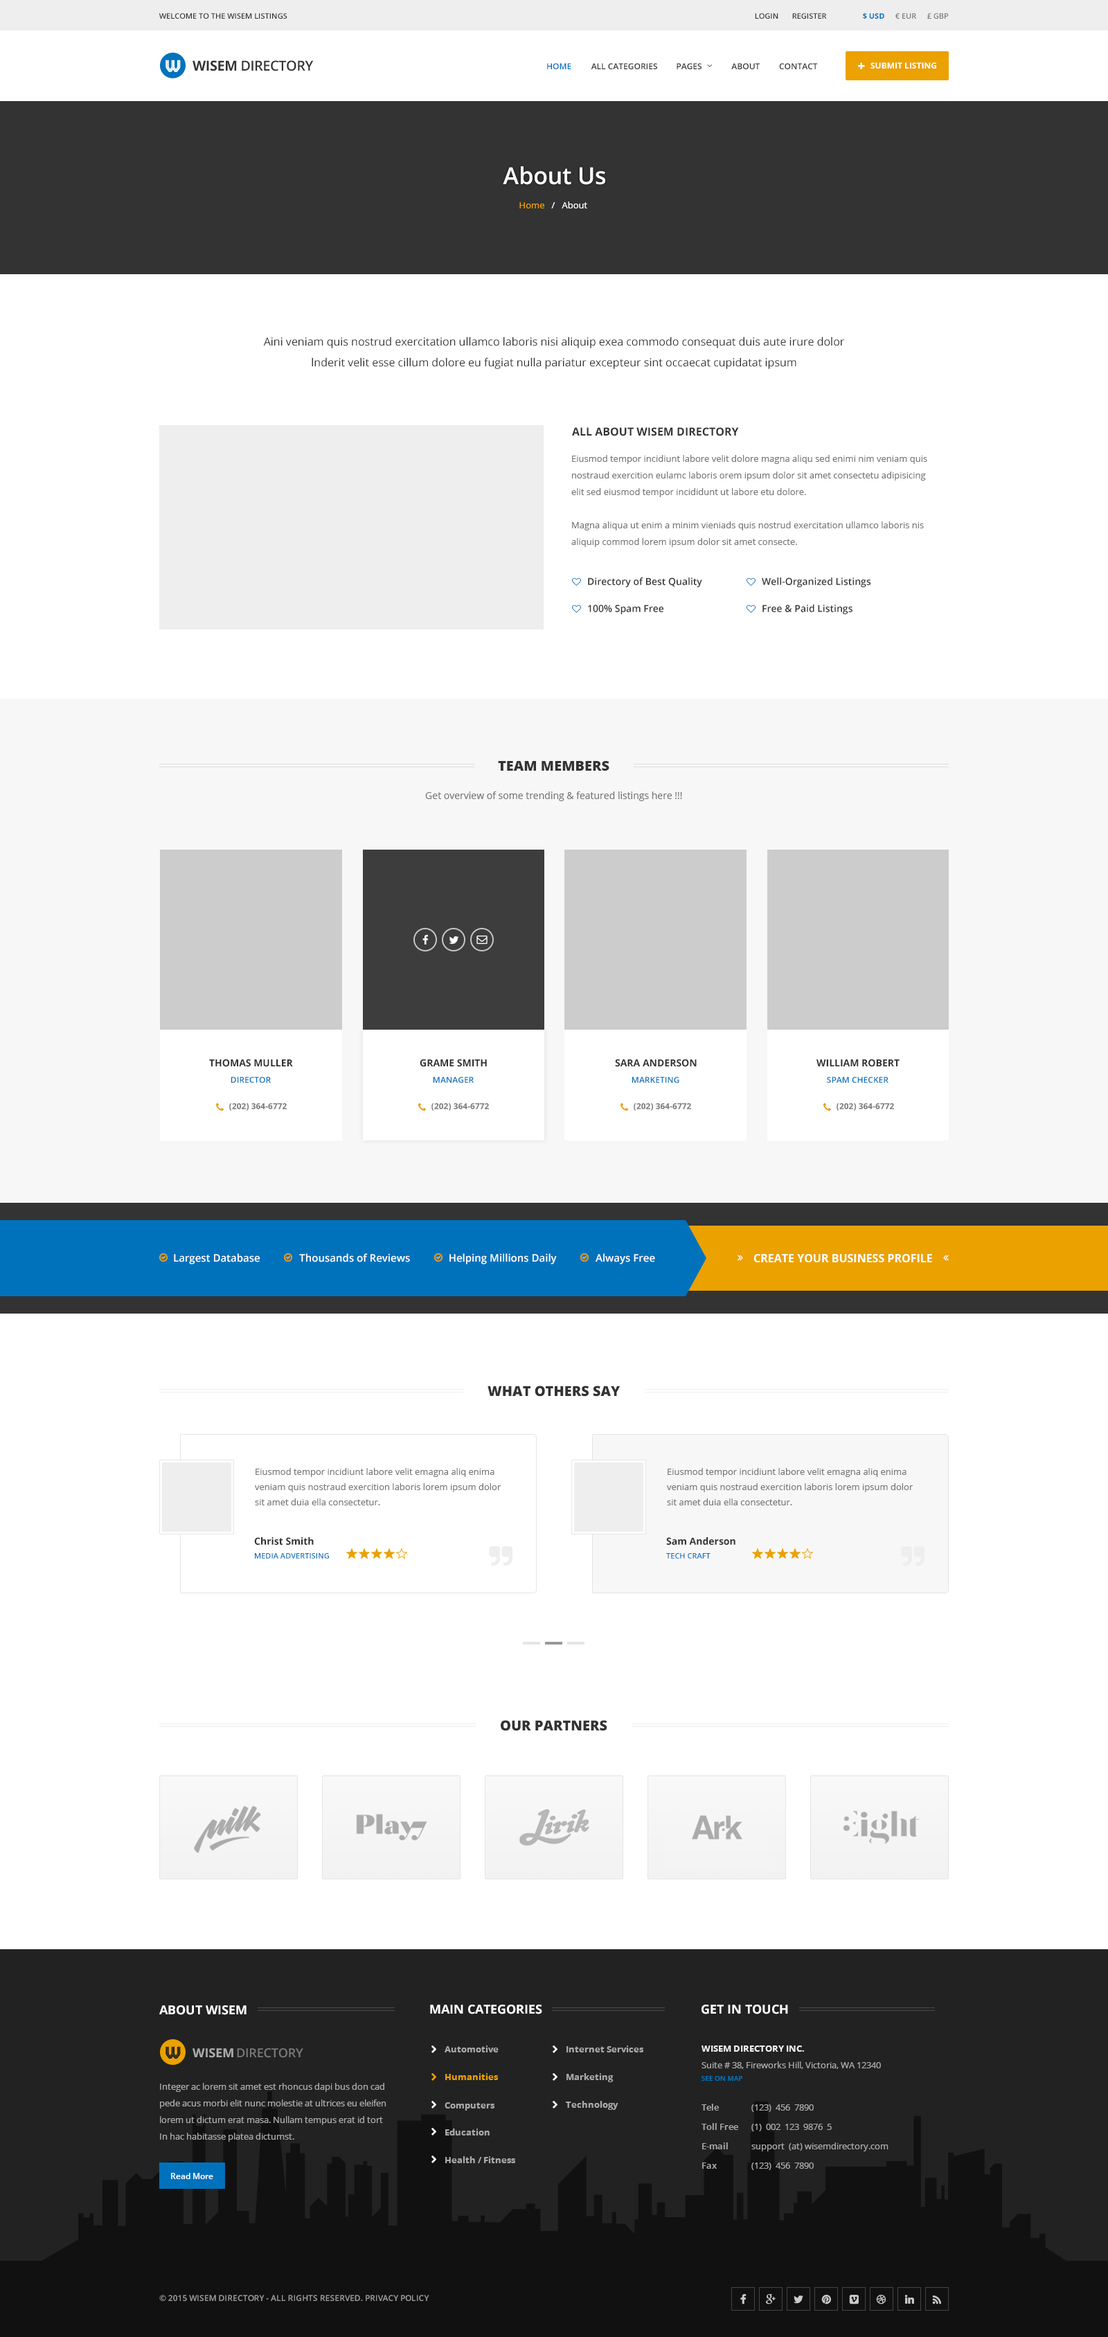
<style>
.page{position:relative;width:1108px;height:2337px;background:#ffffff}
.page>*{position:absolute;margin:0}
.t1{font:7.6px "OpenSans-Semibold";color:#333333;text-transform:uppercase}
.t2{font:7.6px "OpenSans-Bold";color:#0072bc;text-transform:uppercase}
.t3{font:7.6px "OpenSans-Semibold";color:#777777;text-transform:uppercase}
.t4{font:13.8px "OpenSans-Semibold";letter-spacing:-0.025em;color:#333333;text-transform:uppercase}
.t5{font:13.8px "OpenSans-Bold";letter-spacing:-0.025em;color:#333333;text-transform:uppercase}
.t6{font:8.3px "OpenSans-Semibold";color:#0072bc;text-transform:uppercase}
.t7{font:8.3px "OpenSans-Semibold";color:#333333;text-transform:uppercase}
.t8{font:8.3px "OpenSans-Bold";color:#ffffff;text-transform:uppercase}
.t9{font:23.5px "OpenSans-Semibold";color:#ffffff}
.t10{font:9px "OpenSans";color:#ffffff}
.t11{font:9px "OpenSans";color:#eba100}
.t12{font:11.1px/20.8px "OpenSans";color:#333333}
.t13{font:11.1px "OpenSans-Bold";color:#333333;text-transform:uppercase}
.t14{font:9px/16.6px "OpenSans";color:#777777}
.t15{font:9.7px "OpenSans-Semibold";color:#333333}
.t16{font:13.8px "OpenSans-Extrabold";color:#333333;text-transform:uppercase}
.t17{font:9.7px "OpenSans";color:#777777}
.t18{font:9.7px "OpenSans-Bold";color:#333333;text-transform:uppercase}
.t19{font:8.3px "OpenSans-Bold";color:#777777}
.t20{font:10.4px "OpenSans-Semibold";color:#ffffff}
.t21{font:11.1px "OpenSans-Bold";color:#ffffff;text-transform:uppercase}
.t22{font:9px/15.2px "OpenSans";color:#777777}
.t23{font:9.7px "OpenSans-Bold";color:#333333}
.t24{font:7.6px "OpenSans-Semibold";color:#0072bc;text-transform:uppercase}
.t25{font:12.5px "OpenSans-Bold";color:#ffffff;text-transform:uppercase}
.t26{font:12.5px "OpenSans-Bold";color:#ffffff}
.t27{font:9px "OpenSans-Bold";color:#aaaaaa}
.t28{font:9px/16.6px "OpenSans";color:#aaaaaa}
.t29{font:9px/16.6px "OpenSans-Bold";color:#eeeeee}
.t30{font:12.5px "OpenSans-Bold";color:#aaaaaa;text-transform:uppercase}
.t31{font:12.5px "OpenSans-Semibold";letter-spacing:-0.01em;color:#777777;text-transform:uppercase}
.t32{font:9px "OpenSans-Bold";color:#eba100}
.t33{font:6.9px "OpenSans-Semibold";color:#0072bc;text-transform:uppercase}
.t34{font:9px/19.4px "OpenSans-Semibold";color:#aaaaaa}
.t35{font:9px/19.4px "OpenSans";color:#aaaaaa}
.t36{font:8.3px "OpenSans-Semibold";color:#ffffff}
.t37{font:8.3px "OpenSans-Semibold";letter-spacing:-0.01em;color:#999999;text-transform:uppercase}
</style>
<div class="page">
<p class="t1" style="left:159px;top:13px;width:128px;height:6px">Welcome to the Wisem listings</p>
<p class="t1" style="left:755px;top:13px;width:23px;height:6px">LOGIN</p>
<p class="t1" style="left:792px;top:13px;width:35px;height:6px">register</p>
<p class="t2" style="left:863px;top:12px;width:21px;height:7px">$ USD</p>
<p class="t3" style="left:895px;top:13px;width:21px;height:6px">€ EUR</p>
<p class="t3" style="left:927px;top:13px;width:21px;height:6px">£ GBP</p>
<p class="t4" style="left:192px;top:60px;width:122px;height:11px"><span class="t5">wisem</span> directory</p>
<p class="t6" style="left:547px;top:63px;width:24px;height:6px">HOME</p>
<p class="t7" style="left:591px;top:63px;width:66px;height:6px">All categories</p>
<p class="t7" style="left:676px;top:63px;width:25px;height:6px">Pages</p>
<p class="t7" style="left:731px;top:63px;width:28px;height:6px">About</p>
<p class="t7" style="left:779px;top:63px;width:39px;height:6px">Contact</p>
<p class="t8" style="left:870px;top:62px;width:66px;height:7px">Submit Listing</p>
<p class="t9" style="left:503px;top:166px;width:102px;height:19px">About Us</p>
<p class="t10" style="left:519px;top:201px;width:68px;height:7px"><span class="t11">Home</span>   /   About</p>
<p class="t12" style="left:263px;top:336px;width:581px;height:33px;text-align:center">Aini veniam quis nostrud exercitation ullamco laboris nisi aliquip exea commodo consequat duis aute irure dolor<br>lnderit velit esse cillum dolore eu fugiat nulla pariatur excepteur sint occaecat cupidatat ipsum</p>
<p class="t13" style="left:572px;top:427px;width:167px;height:9px">ALL ABOUT wisem directory</p>
<p class="t14" style="left:571px;top:455px;width:356px;height:92px">Eiusmod tempor incidiunt labore velit dolore magna aliqu sed enimi nim veniam quis<br>nostraud exercition eulamc laboris orem ipsum dolor sit amet consectetu adipisicing<br>elit sed eiusmod tempor incididunt ut labore etu dolore.<br><br>Magna aliqua ut enim a minim vieniads quis nostrud exercitation ullamco laboris nis<br>aliquip commod lorem ipsum dolor sit amet consecte.</p>
<p class="t15" style="left:588px;top:577px;width:114px;height:10px">Directory of Best Quality</p>
<p class="t15" style="left:762px;top:577px;width:109px;height:10px">Well-Organized Listings</p>
<p class="t15" style="left:588px;top:604px;width:75px;height:10px">100% Spam Free</p>
<p class="t15" style="left:762px;top:604px;width:90px;height:10px">Free &amp; Paid Listings</p>
<p class="t16" style="left:498px;top:761px;width:111px;height:10px">team members</p>
<p class="t17" style="left:425px;top:791px;width:257px;height:10px">Get overview of some trending &amp; featured listings here !!!</p>
<p class="t18" style="left:209px;top:1059px;width:84px;height:8px">Thomas muller</p>
<p class="t18" style="left:420px;top:1059px;width:67px;height:8px">Grame smith</p>
<p class="t18" style="left:615px;top:1059px;width:81px;height:8px">sara anderson</p>
<p class="t18" style="left:816px;top:1059px;width:83px;height:8px">william robert</p>
<p class="t6" style="left:231px;top:1077px;width:40px;height:6px">Director</p>
<p class="t6" style="left:433px;top:1077px;width:41px;height:6px">Manager</p>
<p class="t6" style="left:631px;top:1077px;width:48px;height:6px">Marketing</p>
<p class="t6" style="left:827px;top:1077px;width:61px;height:6px">spam checker</p>
<p class="t19" style="left:229px;top:1103px;width:58px;height:7px">(202) 364-6772</p>
<p class="t19" style="left:431px;top:1103px;width:58px;height:7px">(202) 364-6772</p>
<p class="t19" style="left:633px;top:1103px;width:58px;height:7px">(202) 364-6772</p>
<p class="t19" style="left:836px;top:1103px;width:58px;height:7px">(202) 364-6772</p>
<p class="t20" style="left:174px;top:1253px;width:86px;height:11px">Largest Database</p>
<p class="t20" style="left:299px;top:1253px;width:111px;height:9px">Thousands of Reviews</p>
<p class="t20" style="left:449px;top:1253px;width:108px;height:11px">Helping Millions Daily</p>
<p class="t20" style="left:595px;top:1253px;width:60px;height:11px">Always Free</p>
<p class="t21" style="left:754px;top:1254px;width:178px;height:8px">create your business profile</p>
<p class="t16" style="left:487px;top:1385px;width:133px;height:11px">What others say</p>
<p class="t22" style="left:255px;top:1468px;width:246px;height:37px">Eiusmod tempor incidiunt labore velit emagna aliq enima<br>veniam quis nostraud exercition laboris lorem ipsum dolor<br>sit amet duia ella consectetur.</p>
<p class="t22" style="left:667px;top:1468px;width:246px;height:37px">Eiusmod tempor incidiunt labore velit emagna aliq enima<br>veniam quis nostraud exercition laboris lorem ipsum dolor<br>sit amet duia ella consectetur.</p>
<p class="t23" style="left:254px;top:1537px;width:60px;height:8px">Christ Smith</p>
<p class="t23" style="left:666px;top:1537px;width:69px;height:8px">Sam Anderson</p>
<p class="t24" style="left:255px;top:1553px;width:74px;height:5px">Media Advertising</p>
<p class="t24" style="left:666px;top:1553px;width:44px;height:5px">tech craft</p>
<p class="t16" style="left:501px;top:1720px;width:106px;height:11px">our partners</p>
<p class="t25" style="left:159px;top:2005px;width:87px;height:10px">About wisem</p>
<p class="t25" style="left:430px;top:2004px;width:112px;height:10px">main categories</p>
<p class="t26" style="left:701px;top:2004px;width:87px;height:10px">GET IN TOUCH</p>
<p class="t27" style="left:444px;top:2045px;width:54px;height:7px">Automotive</p>
<p class="t27" style="left:566px;top:2045px;width:78px;height:7px">Internet Services</p>
<p class="t28" style="left:701px;top:2045px;width:180px;height:24px"><span class="t29">WISEM DIRECTORY INC.<br></span>Suite # 38, Fireworks Hill, Victoria, WA 12340</p>
<p class="t30" style="left:192px;top:2048px;width:41px;height:10px">wisem</p>
<p class="t31" style="left:237px;top:2048px;width:66px;height:10px">directory</p>
<p class="t32" style="left:445px;top:2073px;width:53px;height:7px">Humanities</p>
<p class="t27" style="left:566px;top:2073px;width:47px;height:9px">Marketing</p>
<p class="t33" style="left:701px;top:2076px;width:41px;height:4px">see on map</p>
<p class="t28" style="left:160px;top:2082px;width:226px;height:59px">Integer ac lorem sit amet est rhoncus dapi bus don cad<br>pede acus morbi elit nunc molestie at ultrices eu eleifen<br>lorem ut dictum erat masa. Nullam tempus erat id tort<br>In hac habitasse platea dictumst.</p>
<p class="t27" style="left:444px;top:2102px;width:51px;height:8px">Computers</p>
<p class="t27" style="left:566px;top:2100px;width:52px;height:9px">Technology</p>
<p class="t34" style="left:701px;top:2103px;width:37px;height:65px">Tele<br>Toll Free<br>E-mail<br>Fax</p>
<p class="t35" style="left:751px;top:2104px;width:137px;height:66px">(123)  456  7890<br>(1)  002  123  9876  5<br>support  (at) wisemdirectory.com<br>(123)  456  7890</p>
<p class="t27" style="left:445px;top:2128px;width:44px;height:7px">Education</p>
<p class="t27" style="left:445px;top:2156px;width:71px;height:7px">Health / Fitness</p>
<p class="t36" style="left:171px;top:2172px;width:42px;height:7px">Read More</p>
<p class="t37" style="left:159px;top:2294px;width:204px;height:7px">© 2015 Wisem Directory - All Rights Reserved.</p>
<p class="t37" style="left:366px;top:2294px;width:63px;height:7px">Privacy Policy</p>
</div>
